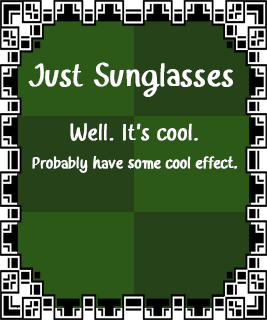
<style>
.page{position:relative;width:267px;height:320px;background:#2c5818}
.page>*{position:absolute;margin:0}
.t1{font:33.8px "charcoal-Medium";color:#ffffff;font-weight:bold}
.t2{font:24px "charcoal-Medium";color:#ffffff;font-weight:bold}
.t3{font:16.8px "charcoal-Medium";color:#ffffff;font-weight:bold}
</style>
<div class="page">
<p class="t1" style="left:28px;top:62px;width:205px;height:35px">Just Sunglasses</p>
<p class="t2" style="left:70px;top:123px;width:128px;height:18px">Well. It's cool.</p>
<p class="t3" style="left:32px;top:156px;width:205px;height:17px">Probably have some cool effect.</p>
</div>
